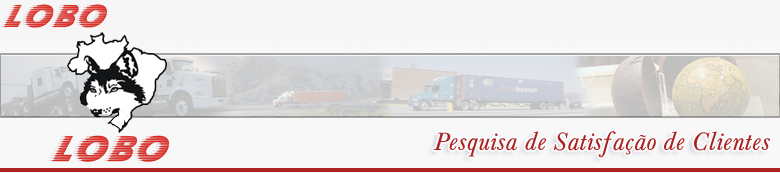
<style>
.page{position:relative;width:780px;height:173px;background:#f8f8f8}
.page>*{position:absolute;margin:0}
.t1{font:26px "Baskerville";color:#ab2222}
</style>
<div class="page">
<p class="t1" style="left:433px;top:131px;width:337px;height:27px">Pesquisa de Satisfação de Clientes</p>
</div>
